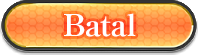
<style>
.page{position:relative;width:198px;height:55px}
.page>*{position:absolute;margin:0}
.t1{font:30px "RyuminPro-ExBold";letter-spacing:-0.04em;color:#ffffff}
</style>
<div class="page">
<p class="t1" style="left:64px;top:13px;width:72px;height:24px">Batal</p>
</div>
